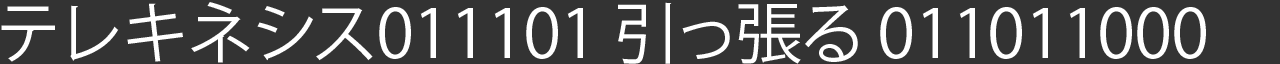
<style>
.page{position:relative;width:1280px;height:64px;background:#333333}
.page>*{position:absolute;margin:0}
.t1{font:66.7px "KozGoPr6N-Regular";color:#ffffff}
</style>
<div class="page">
<p class="t1" style="left:1px;top:2px;width:1205px;height:62px">テレキネシス011101 引っ張る 011011000</p>
</div>
